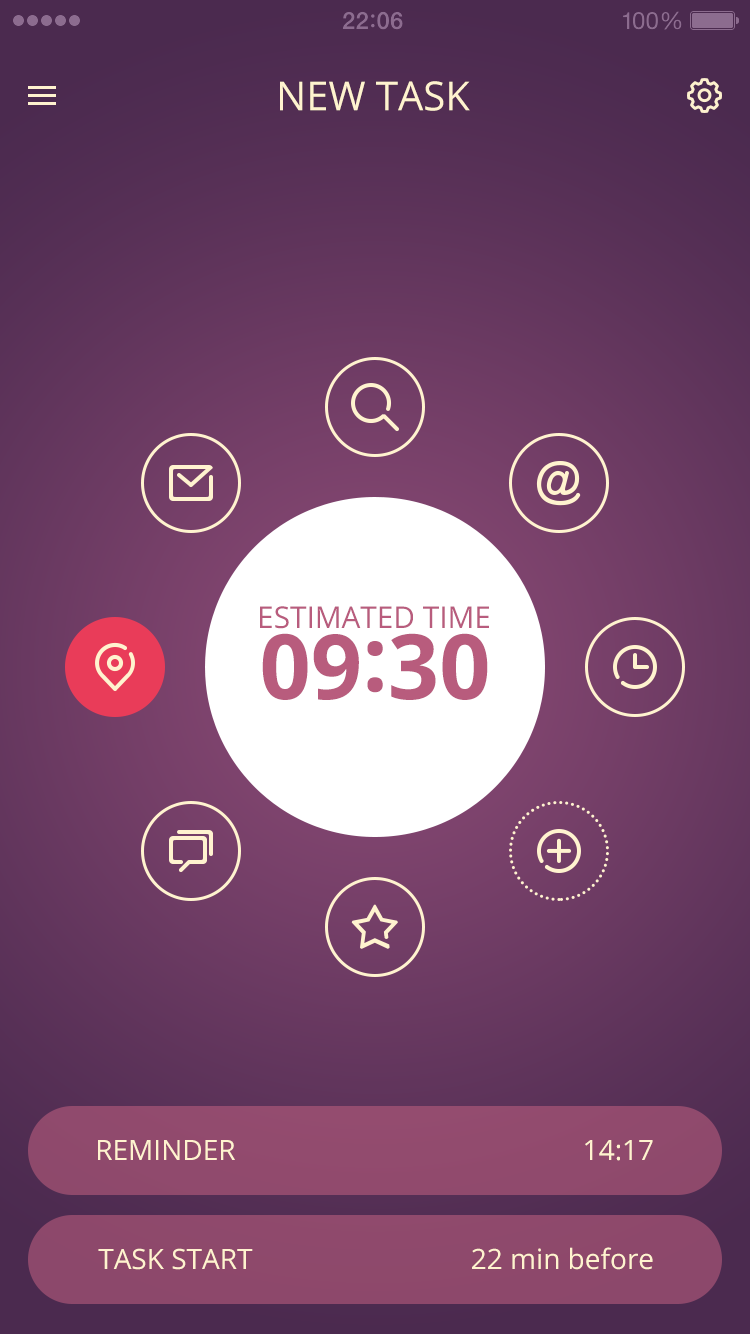
<style>
.page{position:relative;width:750px;height:1334px}
.page>*{position:absolute;margin:0}
.t1{font:40px "OpenSans";color:#fff3cf;text-transform:uppercase}
.t2{font:30px "OpenSans";color:#b85c7d;text-transform:uppercase}
.t3{font:90px "OpenSans-Bold";color:#b85c7d}
.t4{font:28px "OpenSans";color:#fff3cf;text-transform:uppercase}
.t5{font:28px "OpenSans";color:#fff3cf}
</style>
<div class="page">
<p class="t1" style="left:280px;top:81px;width:190px;height:30px">New Task</p>
<p class="t2" style="left:260px;top:606px;width:229px;height:23px">Estimated time</p>
<p class="t3" style="left:262px;top:633px;width:226px;height:67px">09:30</p>
<p class="t4" style="left:98px;top:1140px;width:137px;height:20px">Reminder</p>
<p class="t4" style="left:585px;top:1140px;width:68px;height:21px">14:17</p>
<p class="t4" style="left:98px;top:1248px;width:155px;height:22px">Task Start</p>
<p class="t5" style="left:472px;top:1247px;width:181px;height:23px">22 min before</p>
</div>
